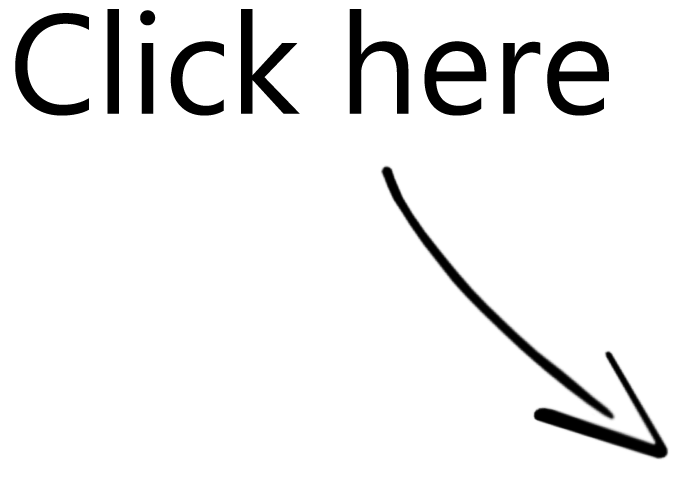
<style>
.page{position:relative;width:688px;height:484px;background:#ffffff}
.page>*{position:absolute;margin:0}
.t1{font:141px "SegoeUI";color:#000000}
</style>
<div class="page">
<p class="t1" style="left:15px;top:9px;width:594px;height:107px">Click here</p>
</div>
